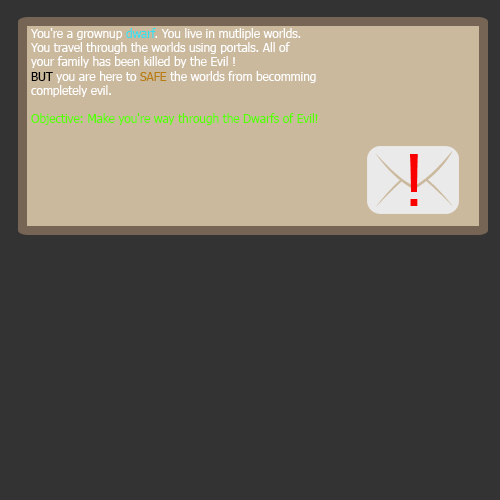
<style>
.page{position:relative;width:500px;height:500px;background:#333333}
.page>*{position:absolute;margin:0}
.t1{font:11.8px "Tahoma";color:#ffffff}
.t2{font:11.8px "Tahoma";color:#31deee}
.t3{font:11.8px "Tahoma";color:#000000}
.t4{font:11.8px "Tahoma";color:#b87d0c}
.t5{font:11.8px "Tahoma";color:#54ff00}
.t6{font:72px "Tahoma";color:#fa0000}
</style>
<div class="page">
<p class="t1" style="left:31px;top:28px;width:287px;height:97px">You're a grownup <span class="t2">dwarf</span>. You live in mutliple worlds.<br>You travel through the worlds using portals. All of<br>your family has been killed by the Evil !<br><span class="t3">BUT</span> you are here to <span class="t4">SAFE </span>the worlds from becomming<br>completely evil. <br><br><span class="t5">Objective: Make you're way through the Dwarfs of Evil!</span></p>
<p class="t6" style="left:410px;top:154px;width:8px;height:52px">!</p>
</div>
